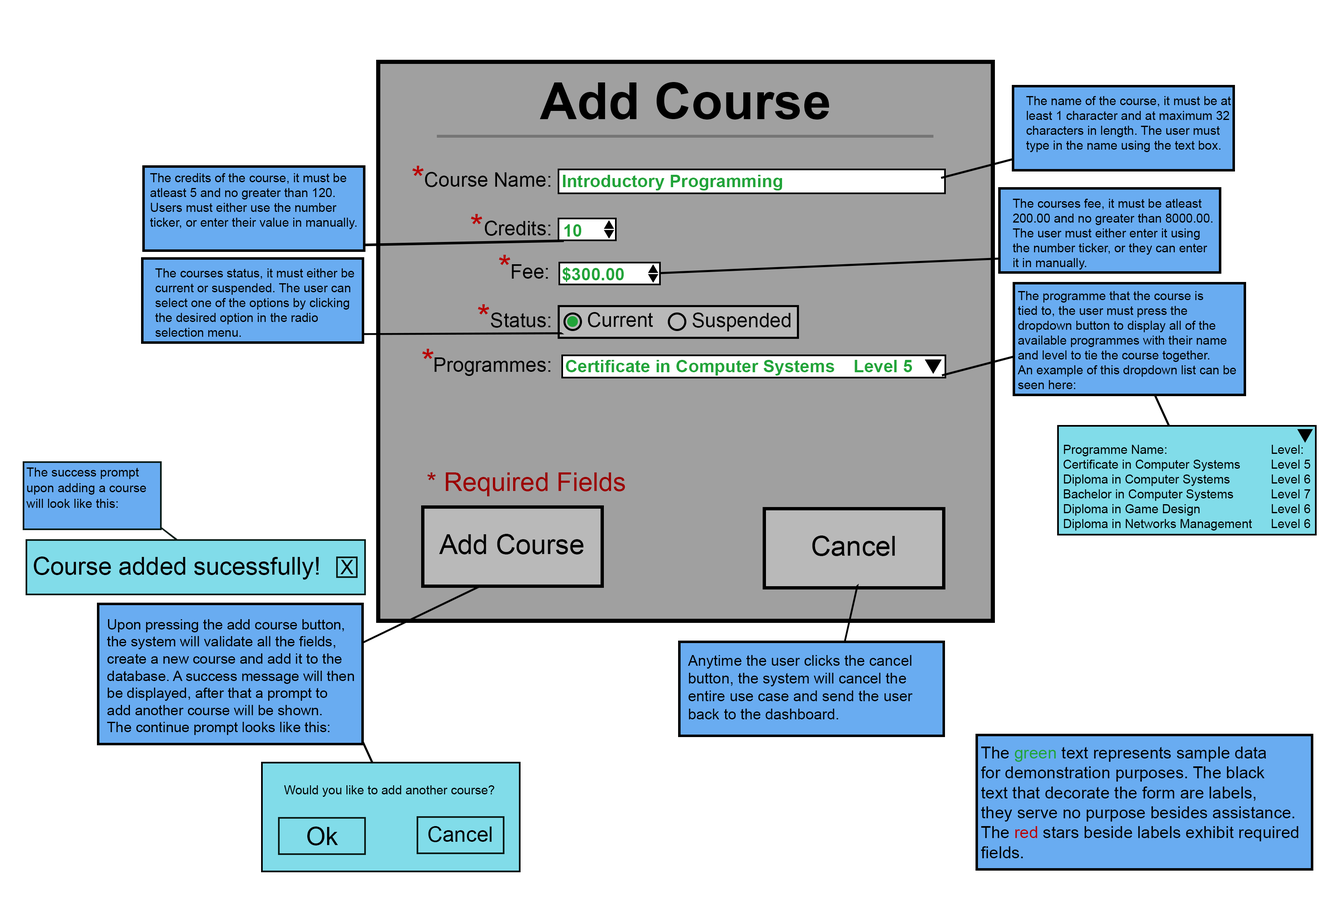
<style>
.page{position:relative;width:1329px;height:897px;background:#ffffff}
.page>*{position:absolute;margin:0}
.t1{font:51.3px "Arial-BoldMT";color:#000000}
.t2{font:12.4px "ArialMT";color:#000000}
.t3{font:34.2px "ArialMT";color:#b80000}
.t4{font:19.8px "ArialMT";color:#000000}
.t5{font:17.5px "Arial-BoldMT";color:#21a439}
.t6{font:13px "ArialMT";color:#000000;scale:0.97 1}
.t7{font:26px "ArialMT";color:#9b0000}
.t8{font:27.5px "ArialMT";color:#000000}
.t9{font:24.6px "ArialMT";color:#000000}
.t10{font:14.3px "ArialMT";color:#000000}
.t11{font:14.9px "ArialMT";color:#000000}
.t12{font:16.7px "ArialMT";color:#000000}
.t13{font:16.7px "ArialMT";color:#21a439}
.t14{font:16.7px "ArialMT";color:#b80000}
.t15{font:25.2px "ArialMT";color:#000000}
.t16{font:21.2px "ArialMT";color:#000000}
</style>
<div class="page">
<p class="t1" style="left:539px;top:82px;width:290px;height:38px">Add Course</p>
<p class="t2" style="left:1026px;top:96px;width:205px;height:56px">The name of the course, it must be at<br>least 1 character and at maximum 32<br>characters in length. The user must <br>type in the name using the text box.</p>
<p class="t2" style="left:150px;top:173px;width:207px;height:56px">The credits of the course, it must be <br>atleast 5 and no greater than 120. <br>Users must either use the number<br>ticker, or enter their value in manually.</p>
<p class="t3" style="left:412px;top:166px;width:12px;height:10px">*</p>
<p class="t4" style="left:425px;top:172px;width:126px;height:15px">Course Name:</p>
<p class="t5" style="left:563px;top:175px;width:219px;height:16px">Introductory Programming</p>
<p class="t2" style="left:1012px;top:199px;width:200px;height:71px">The courses fee, it must be atleast<br>200.00 and no greater than 8000.00.<br>The user must either enter it using <br>the number ticker, or they can enter<br>it in manually.</p>
<p class="t3" style="left:471px;top:214px;width:11px;height:10px">*</p>
<p class="t4" style="left:485px;top:221px;width:66px;height:15px">Credits:</p>
<p class="t5" style="left:564px;top:224px;width:17px;height:13px">10</p>
<p class="t3" style="left:499px;top:255px;width:11px;height:10px">*</p>
<p class="t2" style="left:155px;top:268px;width:199px;height:69px">The courses status, it must either be<br>current or suspended. The user can<br>select one of the options by clicking<br>the desired option in the radio<br>selection menu.</p>
<p class="t4" style="left:512px;top:264px;width:36px;height:15px">Fee:</p>
<p class="t5" style="left:562px;top:267px;width:62px;height:15px">$300.00</p>
<p class="t2" style="left:1017px;top:291px;width:219px;height:98px">The programme that the course is<br>tied to, the user must press the <br>dropdown button to display all of the<br>available programmes with their name<br>and level to tie the course together.<br>An example of this dropdown list can be<br>seen here:</p>
<p class="t3" style="left:478px;top:304px;width:11px;height:11px">*</p>
<p class="t4" style="left:491px;top:313px;width:60px;height:15px">Status:</p>
<p class="t4" style="left:588px;top:312px;width:65px;height:15px">Current</p>
<p class="t4" style="left:692px;top:313px;width:99px;height:19px">Suspended</p>
<p class="t3" style="left:422px;top:349px;width:11px;height:10px">*</p>
<p class="t4" style="left:434px;top:358px;width:117px;height:18px">Programmes:</p>
<p class="t5" style="left:566px;top:360px;width:346px;height:16px">Certificate in Computer Systems  Level 5</p>
<p class="t2" style="left:1063px;top:445px;width:247px;height:86px">Programme Name:       Level:<br>Certificate in Computer Systems   Level 5<br>Diploma in Computer Systems   Level 6<br>Bachelor in Computer Systems   Level 7<br>Diploma in Game Design     Level 6<br>Diploma in Networks Management  Level 6</p>
<p class="t6" style="left:26px;top:468px;width:120px;height:40px">The success prompt<br>upon adding a course<br>will look like this:</p>
<p class="t7" style="left:427px;top:473px;width:198px;height:24px">* Required Fields</p>
<p class="t8" style="left:439px;top:534px;width:145px;height:21px">Add Course</p>
<p class="t8" style="left:812px;top:536px;width:83px;height:20px">Cancel</p>
<p class="t9" style="left:34px;top:557px;width:285px;height:23px">Course added sucessfully!</p>
<p class="t4" style="left:340px;top:560px;width:13px;height:14px">X</p>
<p class="t10" style="left:107px;top:619px;width:247px;height:116px">Upon pressing the add course button,<br>the system will validate all the fields,<br>create a new course and add it to the<br>database. A success message will then<br>be displayed, after that a prompt to<br>add another course will be shown.<br>The continue prompt looks like this:</p>
<p class="t11" style="left:688px;top:655px;width:225px;height:65px">Anytime the user clicks the cancel<br>button, the system will cancel the<br>entire use case and send the user <br>back to the dashboard.</p>
<p class="t12" style="left:981px;top:747px;width:317px;height:112px">The <span class="t13">green </span>text represents sample data<br>for demonstration purposes. The black<br>text that decorate the form are labels,<br>they serve no purpose besides assistance.<br>The <span class="t14">red </span>stars beside labels exhibit required<br>fields.</p>
<p class="t2" style="left:284px;top:786px;width:210px;height:11px">Would you like to add another course?</p>
<p class="t15" style="left:307px;top:827px;width:31px;height:19px">Ok</p>
<p class="t16" style="left:428px;top:826px;width:64px;height:17px">Cancel</p>
</div>
